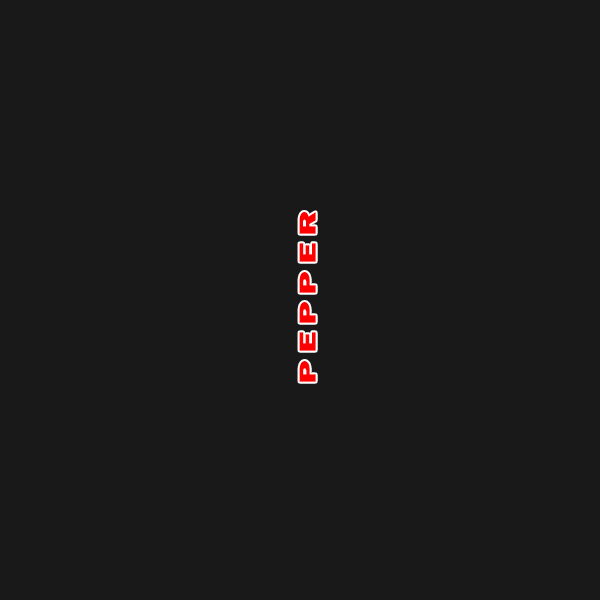
<style>
.page{position:relative;width:600px;height:600px;background:#191919}
.page>*{position:absolute;margin:0}
.t1{font:24.3px "FranklinGothic-Heavy";letter-spacing:0.18em;color:#ff0000;scale:1.52 1}
</style>
<div class="page">
<p class="t1" style="left:299px;top:212px;width:17px;height:170px;rotate:-90deg">PEPPER</p>
</div>
